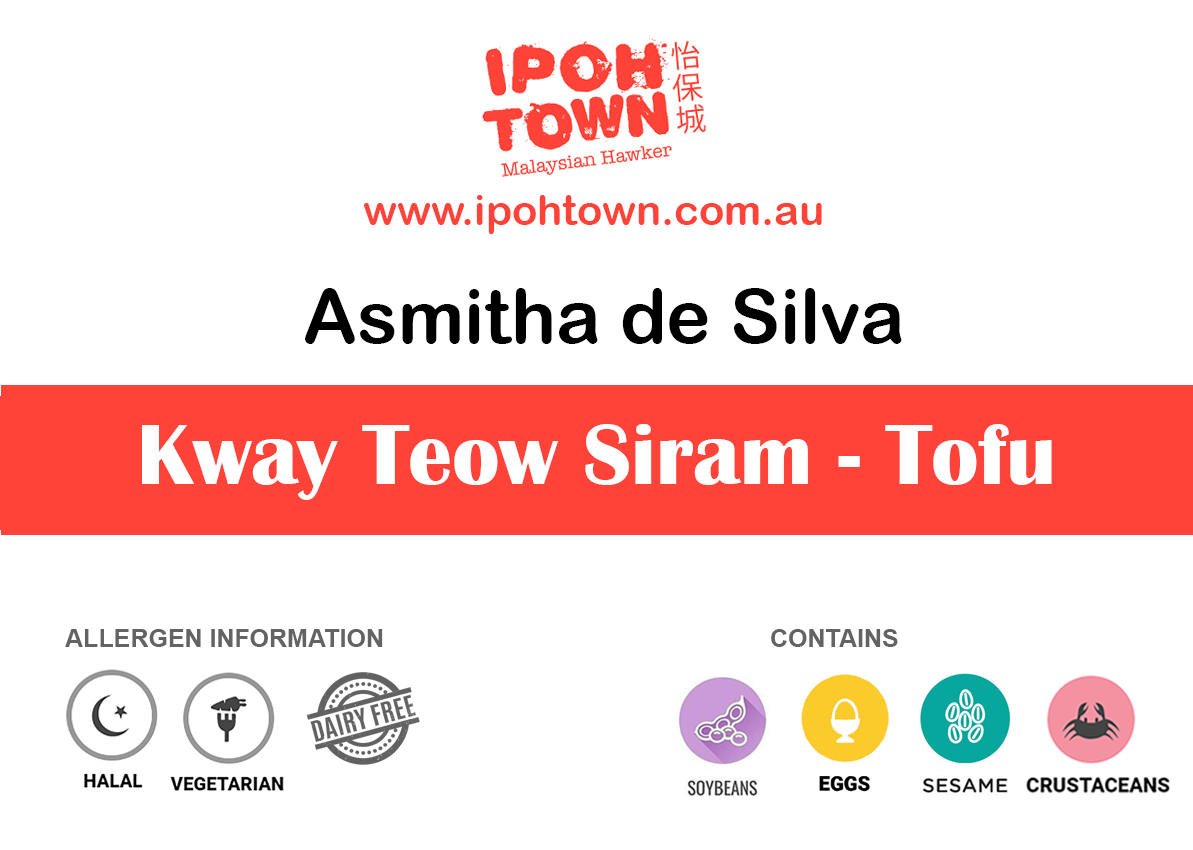
<style>
.page{position:relative;width:1193px;height:850px;background:#ffffff}
.page>*{position:absolute;margin:0}
.t1{font:41.7px "ArialRoundedMTBold";color:#ff4338}
.t2{font:75px "ArialRoundedMTBold";color:#000000}
.t3{font:87.5px "BritannicBold";color:#ffffff}
.t4{font:25px "Arial-BoldMT";color:#636363}
</style>
<div class="page">
<p class="t1" style="left:364px;top:195px;width:458px;height:39px">www.ipohtown.com.au</p>
<p class="t2" style="left:305px;top:288px;width:597px;height:56px">Asmitha de Silva</p>
<p class="t3" style="left:142px;top:424px;width:910px;height:76px">Kway Teow Siram - Tofu</p>
<p class="t4" style="left:65px;top:629px;width:318px;height:18px">ALLERGEN INFORMATION</p>
<p class="t4" style="left:771px;top:629px;width:127px;height:18px">CONTAINS</p>
</div>
